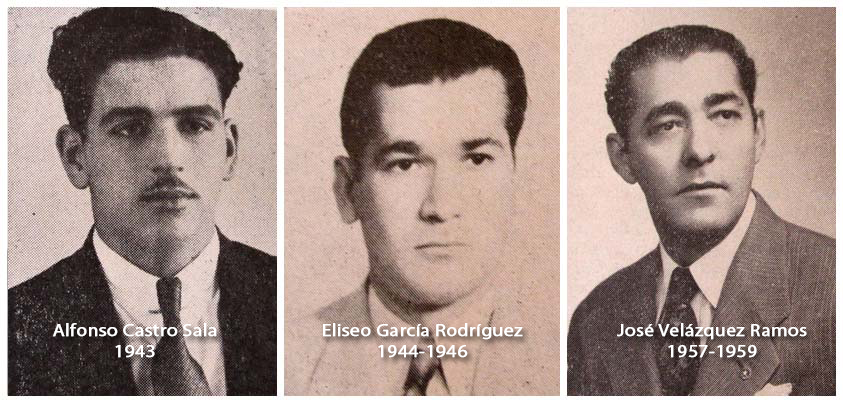
<style>
.page{position:relative;width:843px;height:403px}
.page>*{position:absolute;margin:0}
.t1{font:17.5px "MyriadPro-Regular";color:#ffffff;font-weight:bold;scale:1.11 1}
</style>
<div class="page">
<p class="t1" style="left:53px;top:323px;width:164px;height:35px;text-align:center">Alfonso Castro Sala<br>1943</p>
<p class="t1" style="left:323px;top:323px;width:200px;height:35px;text-align:center">Eliseo García Rodríguez<br>1944-1946</p>
<p class="t1" style="left:617px;top:323px;width:190px;height:35px;text-align:center">José Velázquez Ramos<br>1957-1959</p>
</div>
